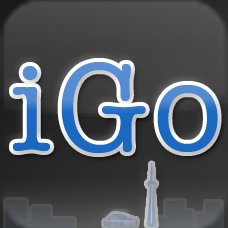
<style>
.page{position:relative;width:228px;height:228px}
.page>*{position:absolute;margin:0}
.t1{font:127px "AmericanTypewriter";letter-spacing:0.05em}
</style>
<div class="page">
<p class="t1" style="left:13px;top:62px;width:205px;height:91px">iGo</p>
</div>
